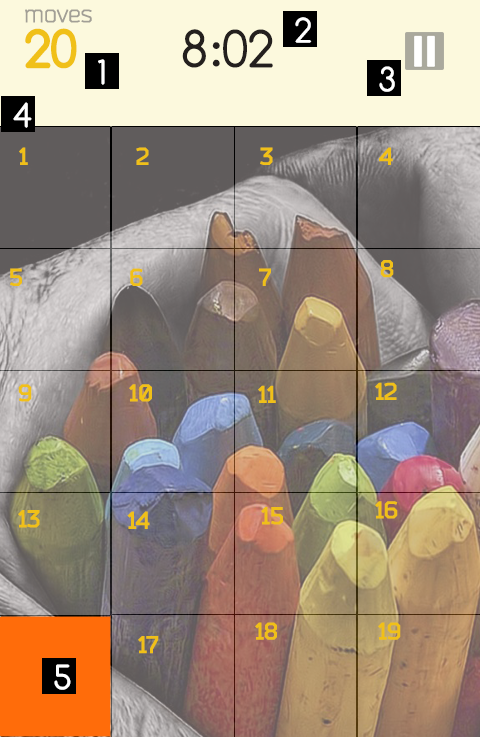
<style>
.page{position:relative;width:480px;height:737px}
.page>*{position:absolute;margin:0}
.t1{font:24px "Bender";color:#a29f96}
.t2{font:36px "Comfortaa";color:#ffffff}
.t3{font:54px "Comfortaa-Bold";color:#f0c018}
.t4{font:54px "Comfortaa";color:#24201e}
.t5{font:24px "Bender-Bold";color:#f0c018}
</style>
<div class="page">
<p class="t1" style="left:25px;top:9px;width:67px;height:14px">moves</p>
<p class="t2" style="left:295px;top:17px;width:17px;height:26px">2</p>
<p class="t3" style="left:25px;top:28px;width:52px;height:41px">20</p>
<p class="t4" style="left:182px;top:29px;width:91px;height:39px">8:02</p>
<p class="t2" style="left:98px;top:59px;width:7px;height:26px">1</p>
<p class="t2" style="left:379px;top:66px;width:16px;height:26px">3</p>
<p class="t2" style="left:13px;top:102px;width:19px;height:26px">4</p>
<p class="t5" style="left:19px;top:147px;width:9px;height:18px">1</p>
<p class="t5" style="left:136px;top:147px;width:13px;height:18px">2</p>
<p class="t5" style="left:260px;top:147px;width:13px;height:18px">3</p>
<p class="t5" style="left:379px;top:147px;width:14px;height:18px">4</p>
<p class="t5" style="left:10px;top:268px;width:12px;height:18px">5</p>
<p class="t5" style="left:130px;top:268px;width:13px;height:18px">6</p>
<p class="t5" style="left:259px;top:268px;width:12px;height:18px">7</p>
<p class="t5" style="left:380px;top:260px;width:14px;height:18px">8</p>
<p class="t5" style="left:18px;top:384px;width:14px;height:18px">9</p>
<p class="t5" style="left:129px;top:384px;width:23px;height:18px">10</p>
<p class="t5" style="left:258px;top:385px;width:18px;height:18px">11</p>
<p class="t5" style="left:375px;top:382px;width:22px;height:18px">12</p>
<p class="t5" style="left:18px;top:510px;width:22px;height:18px">13</p>
<p class="t5" style="left:261px;top:507px;width:22px;height:18px">15</p>
<p class="t5" style="left:375px;top:501px;width:23px;height:18px">16</p>
<p class="t5" style="left:127px;top:511px;width:23px;height:18px">14</p>
<p class="t5" style="left:255px;top:622px;width:22px;height:18px">18</p>
<p class="t5" style="left:378px;top:622px;width:23px;height:18px">19</p>
<p class="t5" style="left:138px;top:636px;width:21px;height:18px">17</p>
<p class="t2" style="left:54px;top:664px;width:17px;height:26px">5</p>
</div>
